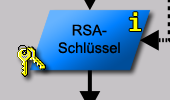
<style>
.page{position:relative;width:170px;height:100px;background:#c6c3c6}
.page>*{position:absolute;margin:0}
.t1{font:24px "Fixedsys";color:#ffff00}
.t2{font:14.7px "ArialMT";color:#000000}
</style>
<div class="page">
<p class="t1" style="left:129px;top:12px;width:12px;height:19px">i</p>
<p class="t2" style="left:58px;top:24px;width:62px;height:30px;text-align:center">RSA-<br>Schlüssel</p>
</div>
